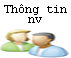
<style>
.page{position:relative;width:71px;height:58px;background:#ffffff}
.page>*{position:absolute;margin:0}
.t1{font:12px/10px "CourierNewPSMT";color:#000000}
</style>
<div class="page">
<p class="t1" style="left:4px;top:4px;width:63px;height:19px;text-align:center">Thông tin<br>nv</p>
</div>
